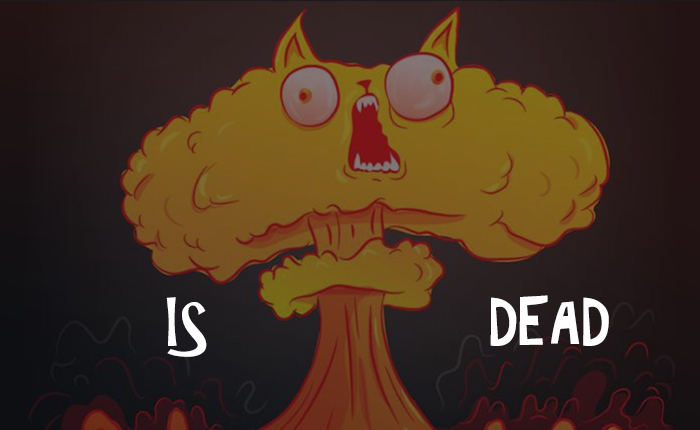
<style>
.page{position:relative;width:700px;height:430px}
.page>*{position:absolute;margin:0}
.t1{font:60px "ARCHRISTY";color:#ffffff}
</style>
<div class="page">
<p class="t1" style="left:166px;top:297px;width:41px;height:60px">IS</p>
<p class="t1" style="left:490px;top:295px;width:119px;height:51px">DEAD</p>
</div>
